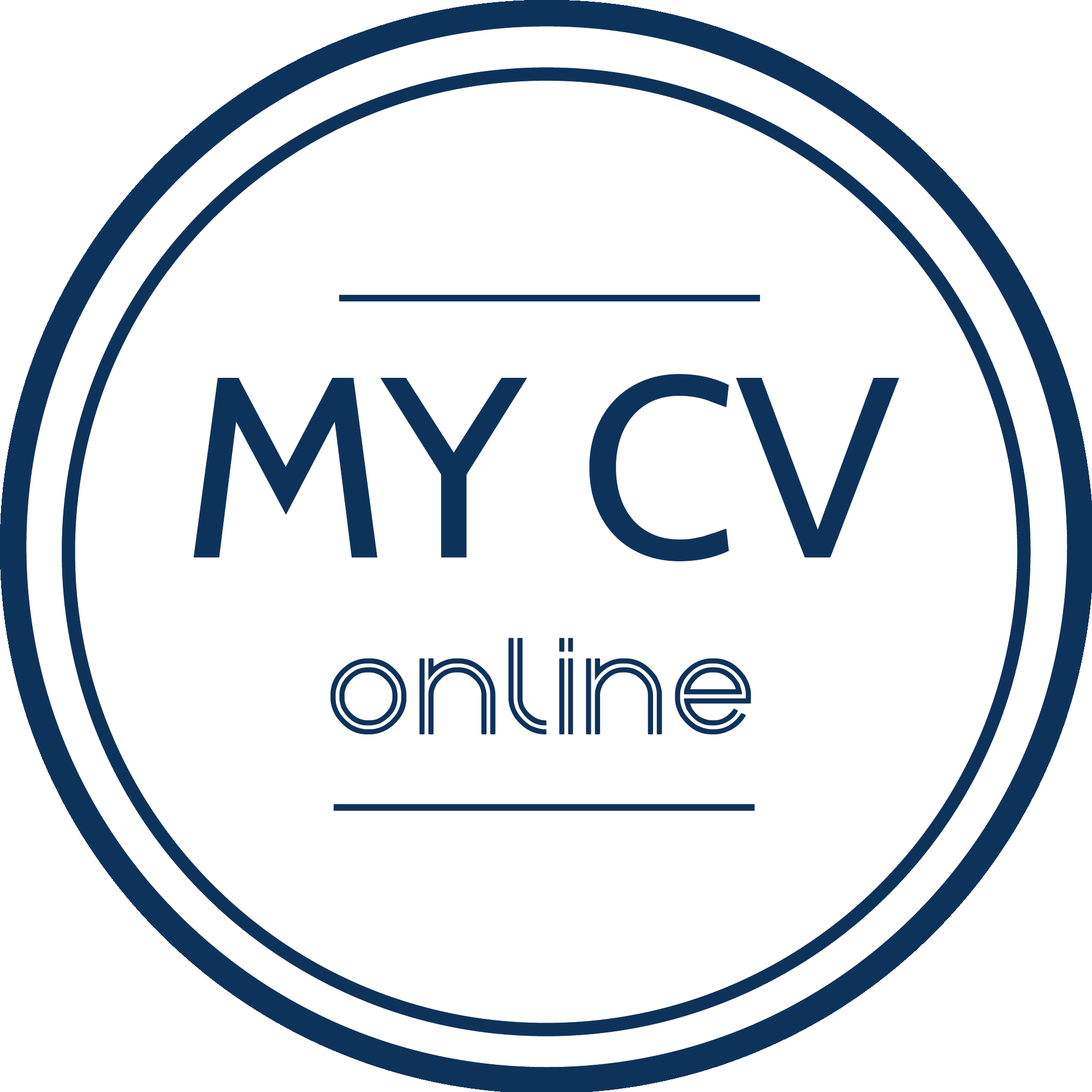
<style>
.page{position:relative;width:1092px;height:1092px;background:#ffffff}
.page>*{position:absolute;margin:0}
.t1{font:147.4px "NextCentury";letter-spacing:-0.01em;color:#0e335b}
.t2{font:256.6px "Cabin-Regular";letter-spacing:-0.01em;color:#0e335b}
</style>
<div class="page">
<p class="t1" style="left:193px;top:374px;width:706px;height:360px;text-align:center"><span class="t2">MY CV<br></span>online</p>
</div>
